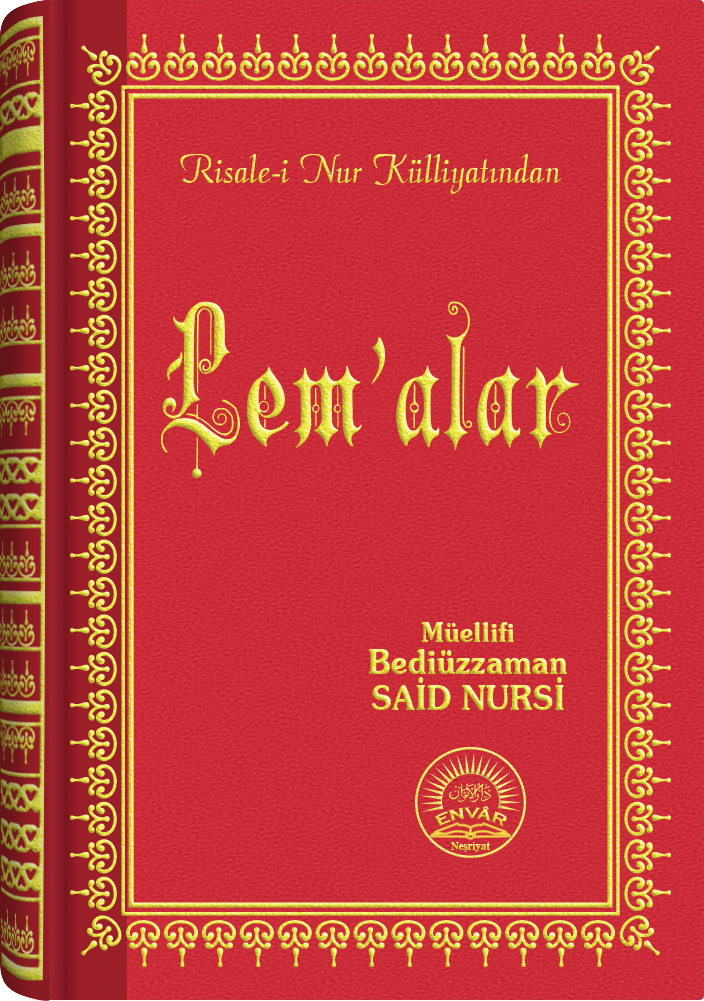
<style>
.page{position:relative;width:704px;height:1001px}
.page>*{position:absolute;margin:0}
.t1{font:45.3px "Barla © 072 Aria ScriptScriptSSi";scale:0.94 1}
.t2{font:181.6px "Barla © 001 Liva Nur";letter-spacing:-0.001em;scale:0.93 1}
.t3{font:33.4px/32.4px "SouvenirITCbyBT-Demi";scale:0.93 1}
.t4{font:27.4px/24.4px "SouvenirITCbyBT-Demi";scale:0.93 1}
.t5{font:33.4px/36.4px "SouvenirITCbyBT-Demi";scale:0.93 1}
.t6{font:15.6px "CopperplateGothic-Bold"}
.t7{font:11.2px "Times-Bold";scale:0.96 1}
</style>
<div class="page">
<p class="t1" style="left:180px;top:154px;width:381px;height:40px">Risale-i Nur Külliyatından</p>
<p class="t2" style="left:160px;top:301px;width:419px;height:177px">Lem’alar</p>
<p class="t3" style="left:369px;top:622px;width:198px;height:88px;text-align:center"><span class="t4">Müellifi<br></span>Bediüzzaman<br><span class="t5">SAİD NURSİ</span></p>
<p class="t6" style="left:434px;top:806px;width:73px;height:21px">ENVÂR</p>
<p class="t7" style="left:451px;top:842px;width:39px;height:10px">Neşriyat</p>
</div>
